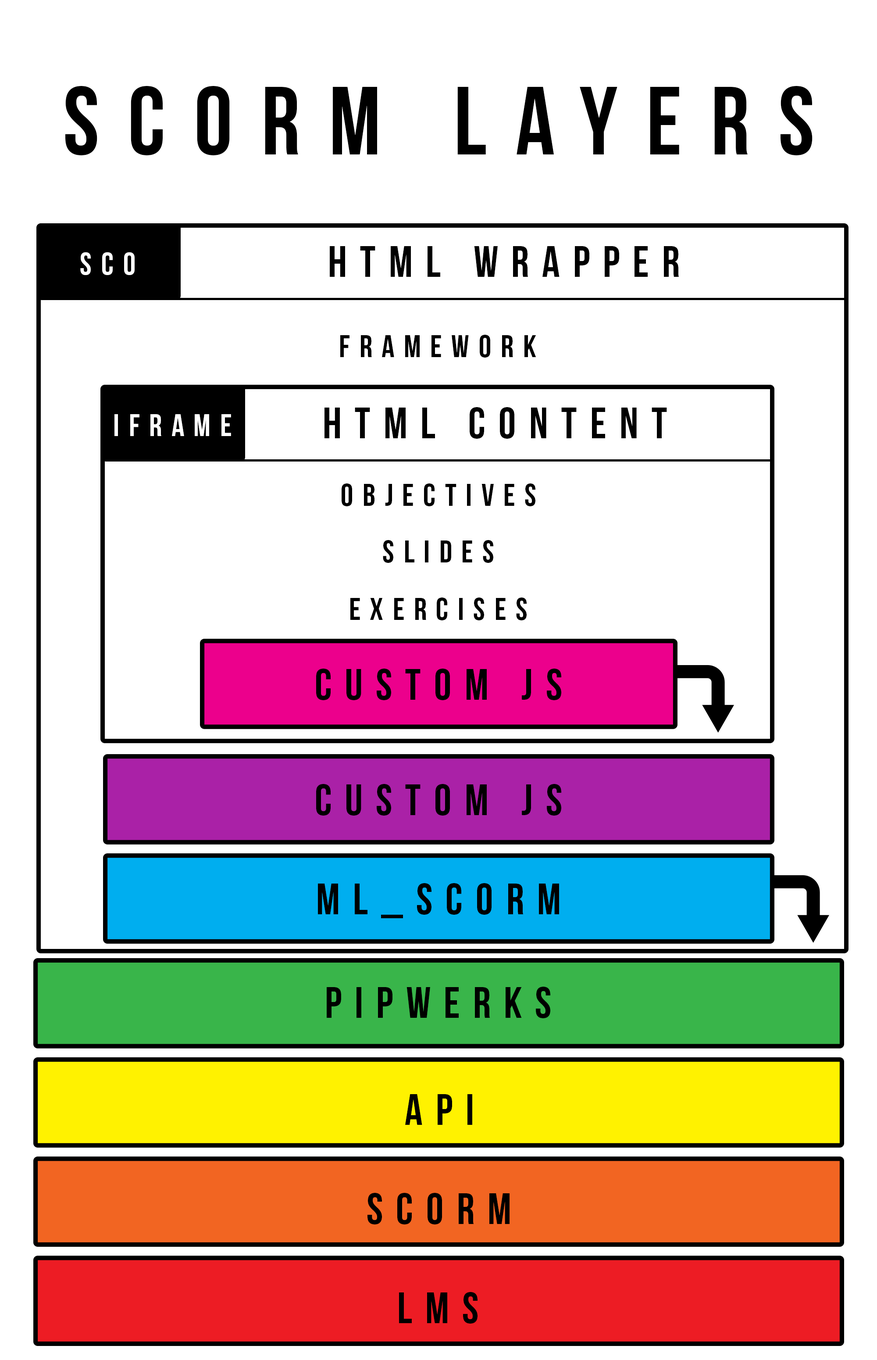
<style>
.page{position:relative;width:877px;height:1360px;background:#ffffff}
.page>*{position:absolute;margin:0}
.t1{font:96.5px "BebasNeue";letter-spacing:0.3em;color:#000000}
.t2{font:31.6px "BebasNeue";letter-spacing:0.3em;color:#ffffff}
.t3{font:43.9px "BebasNeue";letter-spacing:0.3em;color:#000000}
.t4{font:31.6px "BebasNeue";letter-spacing:0.3em;color:#000000}
</style>
<div class="page">
<p class="t1" style="left:65px;top:86px;width:748px;height:69px">scorm layers</p>
<p class="t2" style="left:80px;top:252px;width:55px;height:23px">sco</p>
<p class="t3" style="left:330px;top:246px;width:349px;height:31px">html wrapper</p>
<p class="t4" style="left:340px;top:335px;width:196px;height:22px">framework</p>
<p class="t2" style="left:114px;top:414px;width:117px;height:22px">iframe</p>
<p class="t3" style="left:325px;top:407px;width:342px;height:32px">html content</p>
<p class="t4" style="left:342px;top:483px;width:193px;height:23px">objectives</p>
<p class="t4" style="left:383px;top:540px;width:110px;height:23px">slides</p>
<p class="t4" style="left:350px;top:597px;width:177px;height:23px">exercises</p>
<p class="t3" style="left:316px;top:668px;width:245px;height:32px">Custom js</p>
<p class="t3" style="left:316px;top:784px;width:245px;height:31px">Custom js</p>
<p class="t3" style="left:318px;top:883px;width:241px;height:35px">ml_scorm</p>
<p class="t3" style="left:327px;top:986px;width:223px;height:32px">Pipwerks</p>
<p class="t3" style="left:405px;top:1094px;width:67px;height:30px">API</p>
<p class="t3" style="left:368px;top:1192px;width:142px;height:32px">SCORM</p>
<p class="t3" style="left:399px;top:1292px;width:79px;height:31px">LMS</p>
</div>
